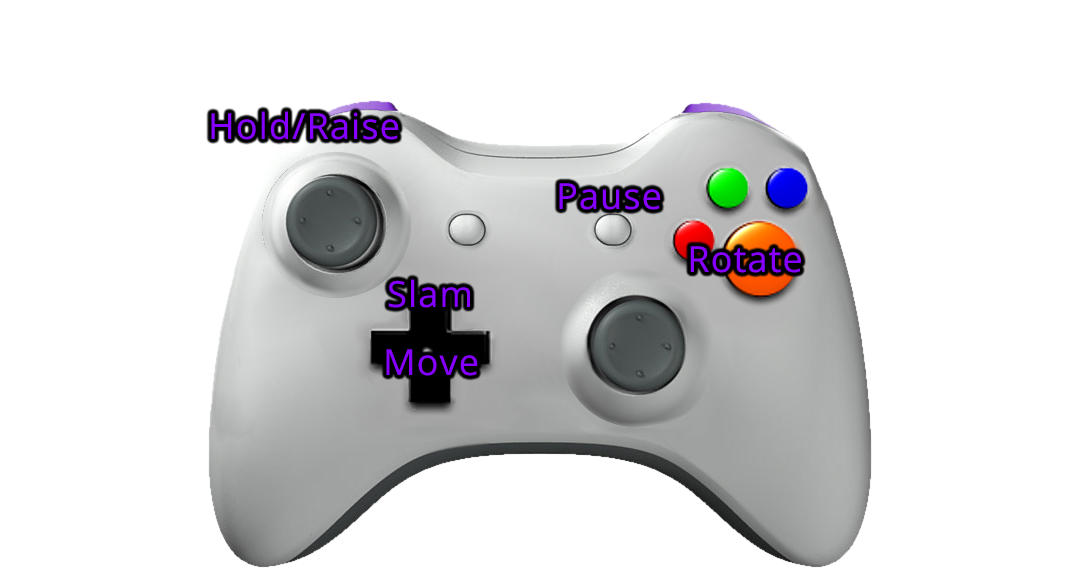
<style>
.page{position:relative;width:1086px;height:578px;background:#ffffff}
.page>*{position:absolute;margin:0}
.t1{font:36px "OpenSans";letter-spacing:0.032em;color:#8500ff}
</style>
<div class="page">
<p class="t1" style="left:211px;top:111px;width:188px;height:29px">Hold/Raise</p>
<p class="t1" style="left:559px;top:183px;width:102px;height:27px">Pause</p>
<p class="t1" style="left:690px;top:246px;width:111px;height:27px">Rotate</p>
<p class="t1" style="left:388px;top:279px;width:82px;height:29px">Slam</p>
<p class="t1" style="left:386px;top:349px;width:92px;height:27px">Move</p>
</div>
